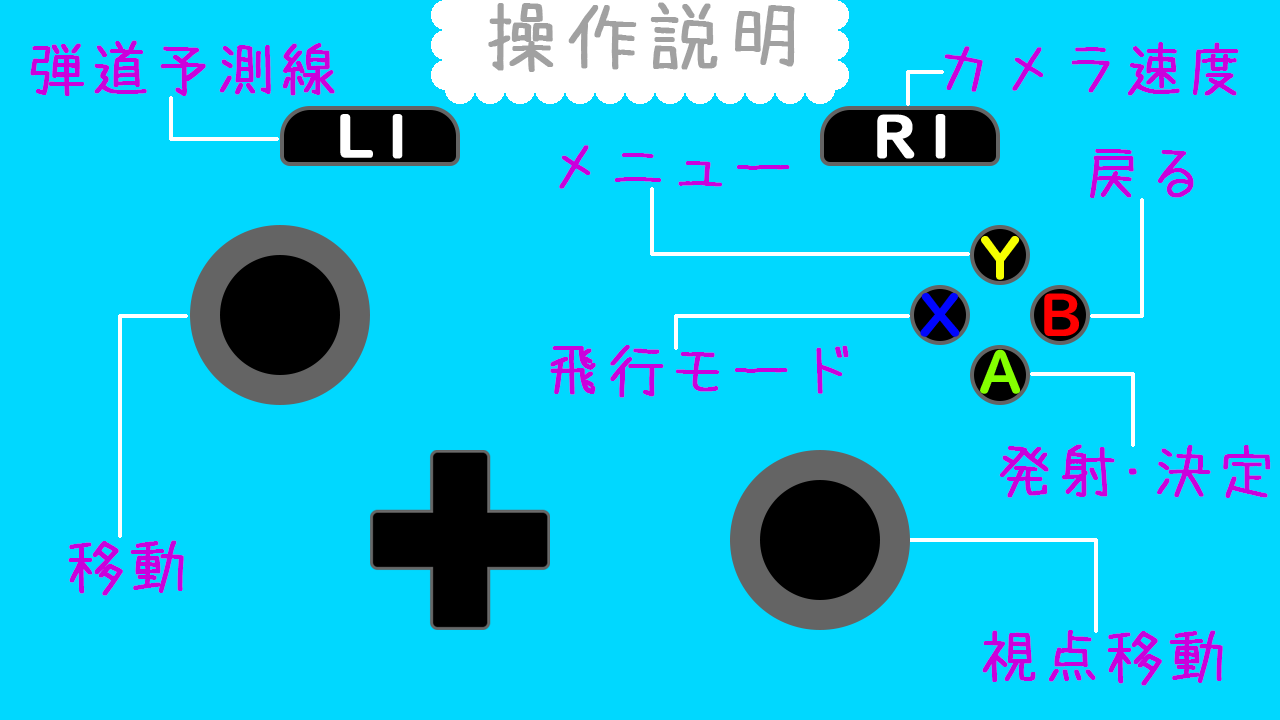
<style>
.page{position:relative;width:1280px;height:720px;background:#00d8ff}
.page>*{position:absolute;margin:0}
.t1{font:75px "azuki_font";letter-spacing:0.05em;color:#a1a1a1;font-weight:bold}
.t2{font:58.3px "azuki_font";letter-spacing:0.05em;color:#ca00dc;font-weight:bold}
</style>
<div class="page">
<p class="t1" style="left:488px;top:2px;width:307px;height:70px">操作説明</p>
<p class="t2" style="left:30px;top:40px;width:305px;height:56px">弾道予測線</p>
<p class="t2" style="left:944px;top:42px;width:295px;height:54px">カメラ速度</p>
<p class="t2" style="left:559px;top:145px;width:231px;height:44px">メニュー</p>
<p class="t2" style="left:1090px;top:149px;width:104px;height:49px">戻る</p>
<p class="t2" style="left:550px;top:345px;width:299px;height:53px">飛行モード</p>
<p class="t2" style="left:999px;top:444px;width:272px;height:54px">発射･決定</p>
<p class="t2" style="left:68px;top:540px;width:116px;height:56px">移動</p>
<p class="t2" style="left:982px;top:630px;width:241px;height:56px">視点移動</p>
</div>
